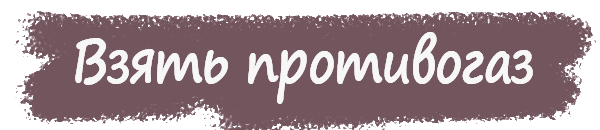
<style>
.page{position:relative;width:600px;height:130px;background:#73555e}
.page>*{position:absolute;margin:0}
.t1{font:60px "SegoePrint-Bold";letter-spacing:-0.025em;color:#f8f7f7;scale:0.82 1}
</style>
<div class="page">
<p class="t1" style="left:75px;top:32px;width:458px;height:72px">Взять противогаз</p>
</div>
